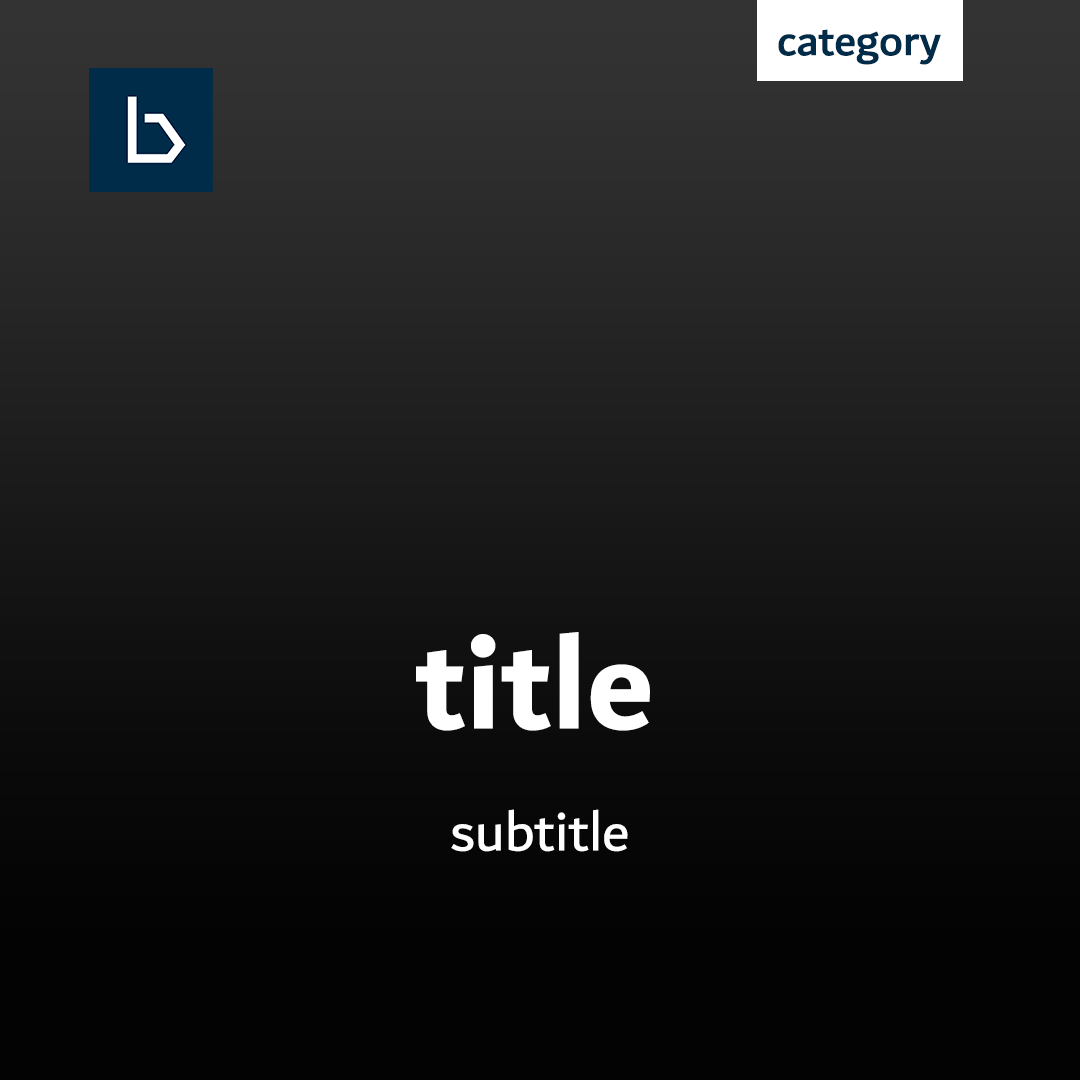
<style>
.page{position:relative;width:1080px;height:1080px}
.page>*{position:absolute;margin:0}
.t1{font:45.8px "Dubai-Medium";color:#002b49}
.t2{font:137.5px "Dubai-Bold";color:#ffffff}
.t3{font:58.3px "Dubai-Regular";color:#ffffff}
</style>
<div class="page">
<p class="t1" style="left:778px;top:29px;width:163px;height:36px">category</p>
<p class="t2" style="left:416px;top:632px;width:234px;height:99px">title</p>
<p class="t3" style="left:451px;top:809px;width:177px;height:43px">subtitle</p>
</div>
